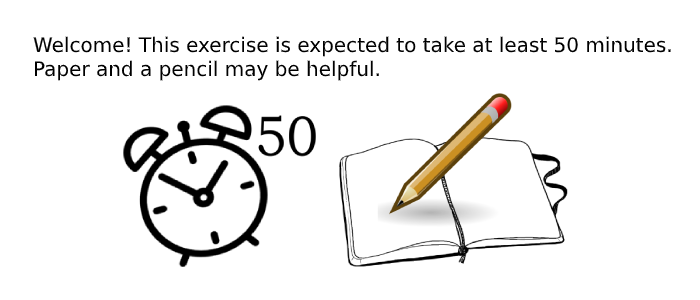
<style>
.page{position:relative;width:700px;height:300px;background:#ffffff}
.page>*{position:absolute;margin:0}
.t1{font:20px "DejaVuSans";color:#000000}
</style>
<div class="page">
<p class="t1" style="left:33px;top:36px;width:638px;height:45px">Welcome! This exercise is expected to take at least 50 minutes.<br>Paper and a pencil may be helpful.</p>
</div>
